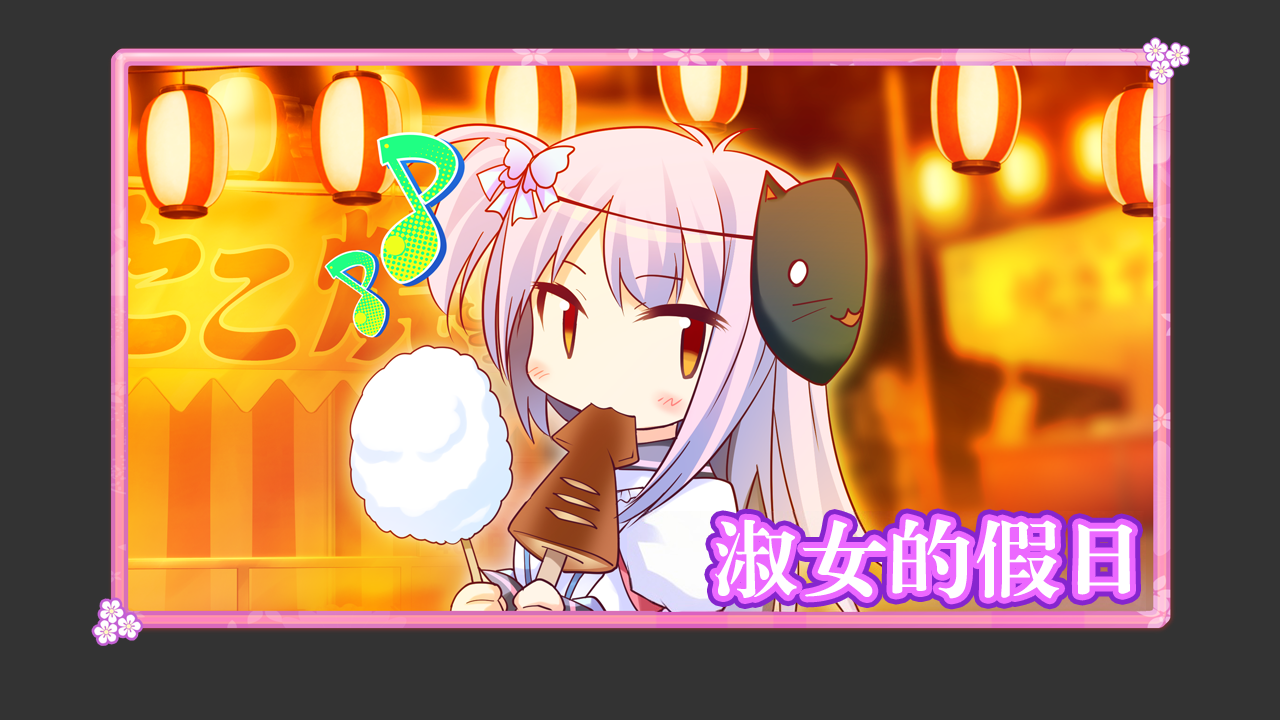
<style>
.page{position:relative;width:1280px;height:720px;background:#333333}
.page>*{position:absolute;margin:0}
.t1{font:85px "FZXBSK--GBK1-0";color:#ffffff;font-weight:bold}
</style>
<div class="page">
<p class="t1" style="left:715px;top:519px;width:417px;height:80px">淑女的假日</p>
</div>
